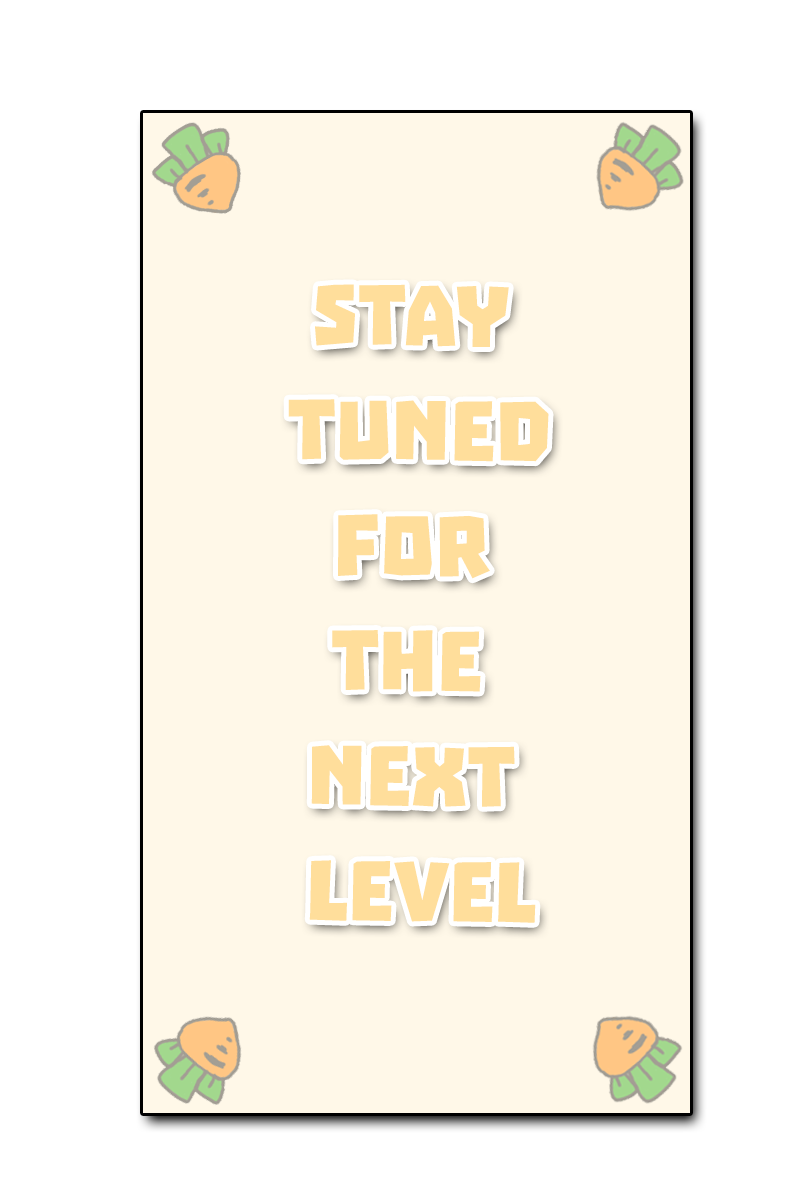
<style>
.page{position:relative;width:800px;height:1200px;background:#fff8e8}
.page>*{position:absolute;margin:0}
.t1{font:96px "Troika";color:#ffde9b;text-transform:uppercase}
</style>
<div class="page">
<p class="t1" style="left:288px;top:284px;width:261px;height:639px;rotate:1deg">stay <br>tuned <br>  for <br>  the <br> next <br> level</p>
</div>
